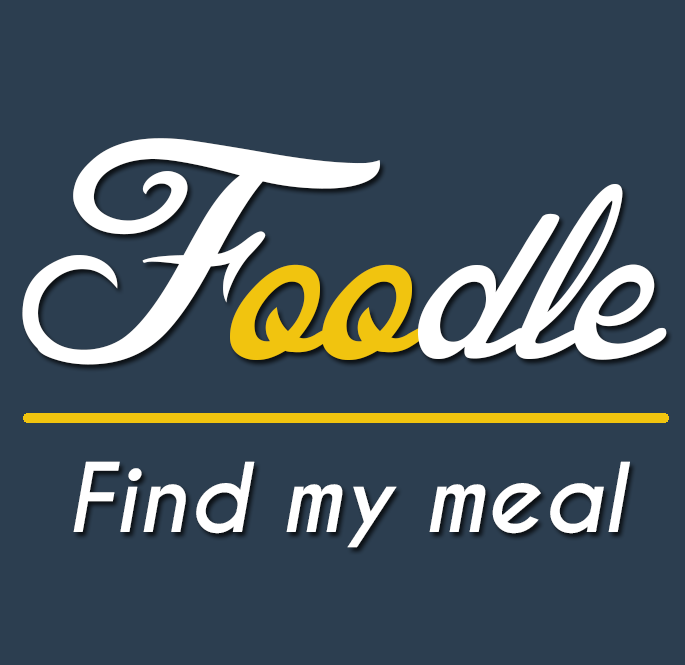
<style>
.page{position:relative;width:685px;height:665px;background:#2c3e50}
.page>*{position:absolute;margin:0}
.t1{font:400px "BlessedDay";color:#ffffff}
.t2{font:400px "BlessedDay";color:#f1c40f}
.t3{font:90px "CaviarDreams-BoldItalic";color:#ffffff}
</style>
<div class="page">
<p class="t1" style="left:22px;top:138px;width:645px;height:227px">F<span class="t2">oo</span>dle</p>
<p class="t3" style="left:73px;top:461px;width:557px;height:87px">Find my meal</p>
</div>
